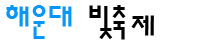
<style>
.page{position:relative;width:200px;height:40px;background:#ffffff}
.page>*{position:absolute;margin:0}
.t1{font:35.1px "H2sa1M";color:#0897f6;scale:1.11 1}
.t2{font:35.1px "H2sa1M";color:#000000;scale:1.11 1}
.t3{font:35.4px "H2sa1M";color:#000000;scale:1.06 1}
</style>
<div class="page">
<p class="t1" style="left:6px;top:5px;width:120px;height:35px">해운대<span class="t2"> 빛축</span></p>
<p class="t3" style="left:131px;top:15px;width:23px;height:21px">제</p>
</div>
